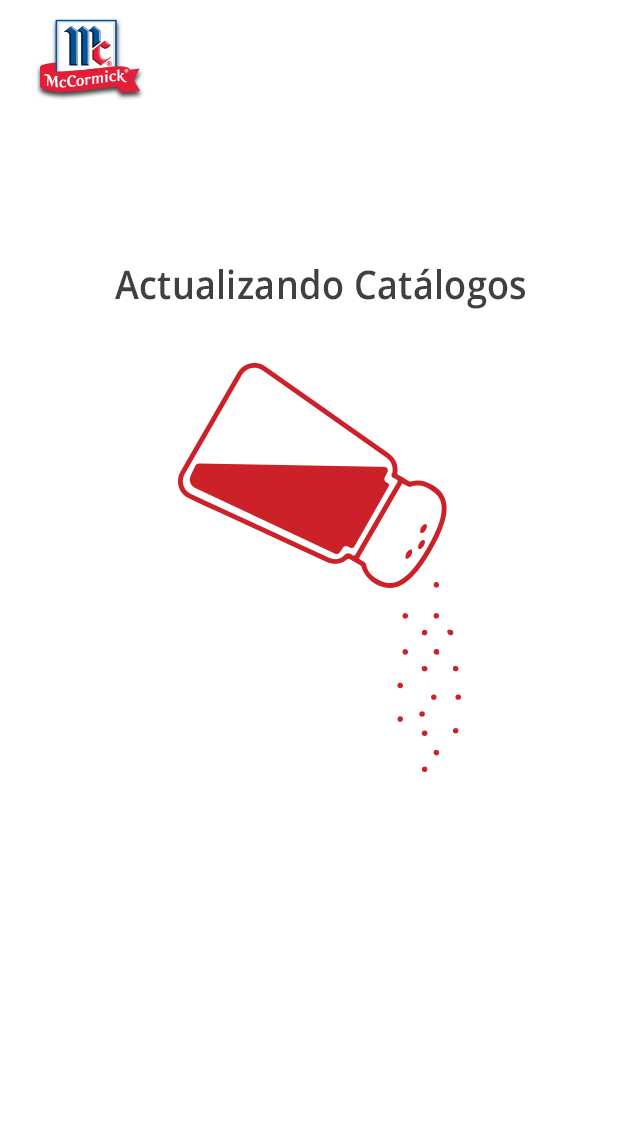
<style>
.page{position:relative;width:640px;height:1136px;background:#ffffff}
.page>*{position:absolute;margin:0}
.t1{font:39.6px "OpenSans-SemiBold";letter-spacing:0.01em;color:#404040;scale:0.91 1}
</style>
<div class="page">
<p class="t1" style="left:115px;top:268px;width:410px;height:41px">Actualizando Catálogos</p>
</div>
